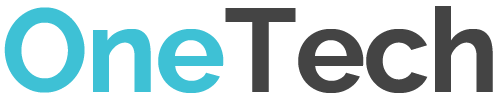
<style>
.page{position:relative;width:500px;height:99px;background:#ffffff}
.page>*{position:absolute;margin:0}
.t1{font:118.2px "Raleway-Bold";letter-spacing:-0.02em;color:#444444}
.t2{font:118.2px "Raleway-Bold";letter-spacing:-0.02em;color:#3ec1d5}
</style>
<div class="page">
<p class="t1" style="left:4px;top:6px;width:489px;height:87px"><span class="t2">One</span>Tech</p>
</div>
